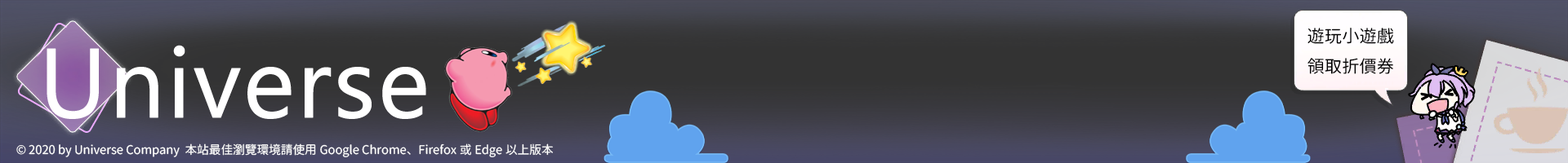
<style>
.page{position:relative;width:1568px;height:163px}
.page>*{position:absolute;margin:0}
.t1{font:17.4px "GenJyuuGothic-P-Regular";color:#000000}
.t2{font:12px "GenJyuuGothic-P-Regular";color:#ffffff}
</style>
<div class="page">
<p class="t1" style="left:1307px;top:28px;width:87px;height:46px">遊玩小遊戲<br>領取折價券</p>
<p class="t2" style="left:16px;top:144px;width:537px;height:14px">© 2020 by Universe Company  本站最佳瀏覽環境請使用Google Chrome、Firefox或Edge以上版本</p>
</div>
